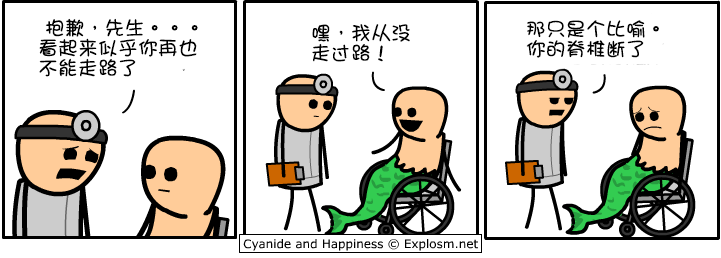
<style>
.page{position:relative;width:721px;height:258px;background:#ffffff}
.page>*{position:absolute;margin:0}
.t1{font:20px/20px "DFGirl";color:#000000}
</style>
<div class="page">
<p class="t1" style="left:39px;top:18px;width:159px;height:59px">抱歉，先生。。。<br>看起来似乎你再也<br>不能走路了</p>
<p class="t1" style="left:312px;top:24px;width:98px;height:38px">嘿，我从没<br>走过路！</p>
<p class="t1" style="left:526px;top:20px;width:133px;height:38px">那只是个比喻。<br>你的脊椎断了</p>
</div>
